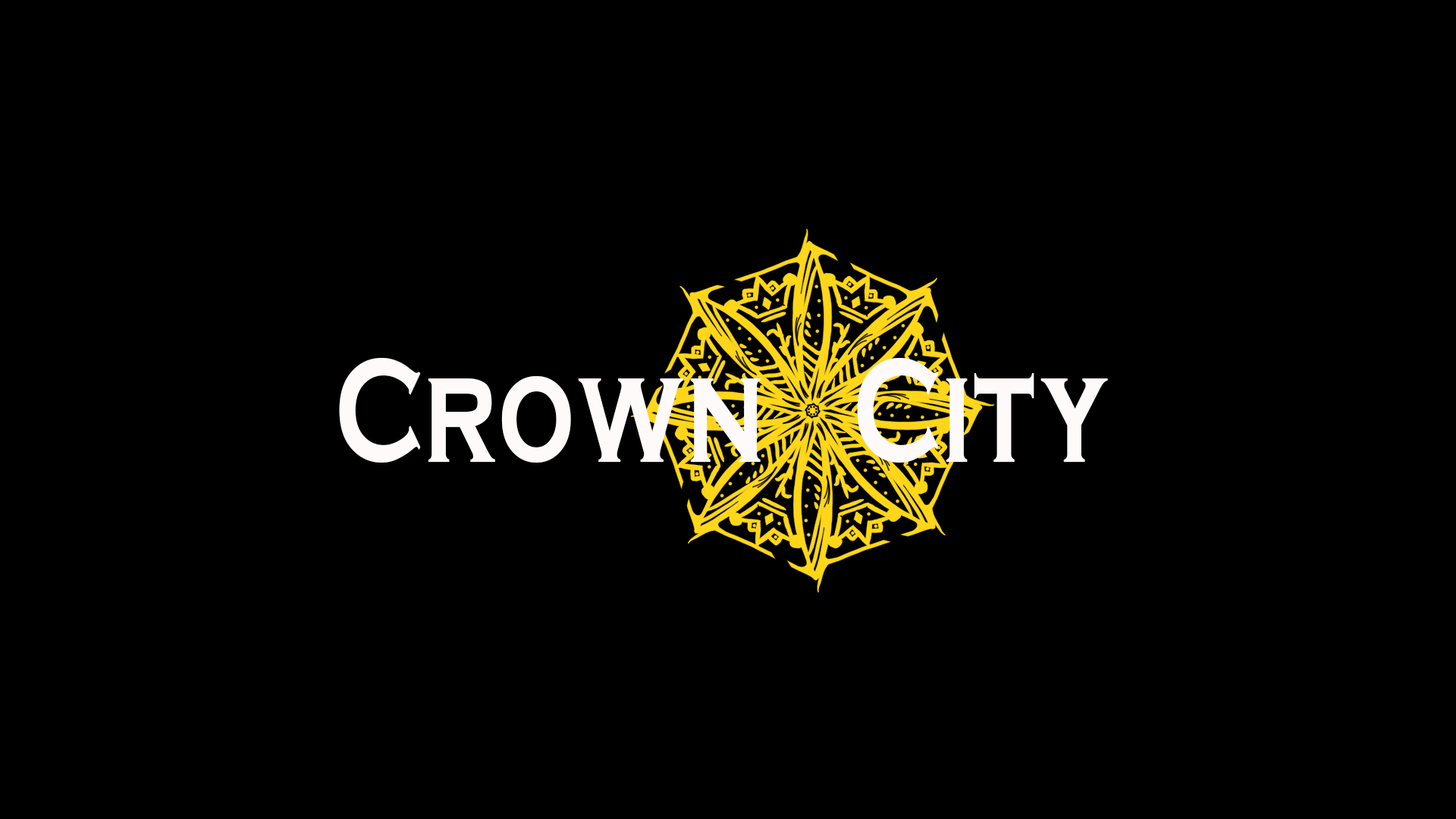
<style>
.page{position:relative;width:1456px;height:819px;background:#000000}
.page>*{position:absolute;margin:0}
.t1{font:153.1px "Copperplate-Bold";color:#fffafa;scale:0.7 1}
</style>
<div class="page">
<p class="t1" style="left:339px;top:358px;width:769px;height:105px">Crown   City</p>
</div>
